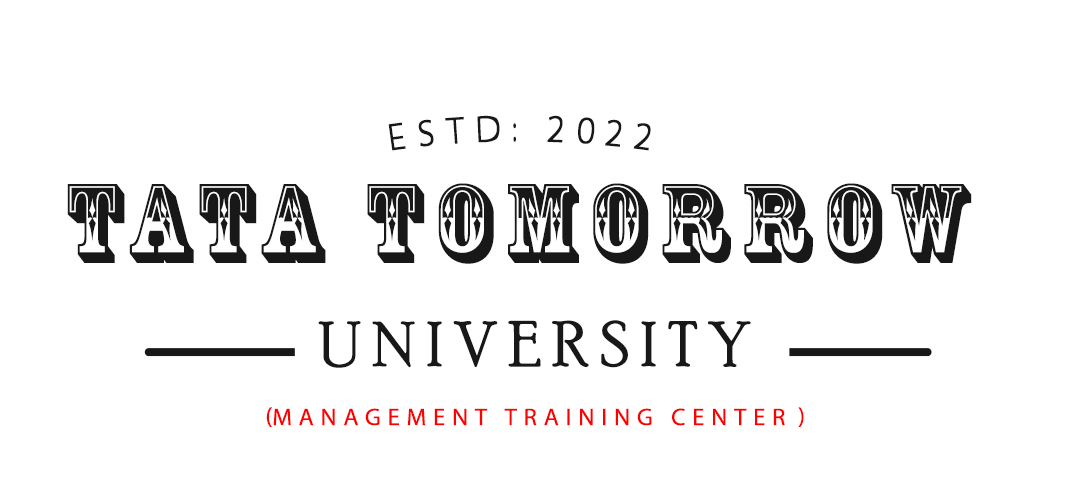
<style>
.page{position:relative;width:1067px;height:481px;background:#ffffff}
.page>*{position:absolute;margin:0}
.t1{font:36.8px "MyriadPro-Regular";letter-spacing:0.26em;color:#181818;text-transform:uppercase}
.t2{font:105.1px "RosewoodStd-Regular";letter-spacing:0.12em;color:#181818;text-transform:uppercase}
.t3{font:63.5px "PoorRichard-Regular";letter-spacing:0.18em;color:#181818;text-transform:uppercase}
.t4{font:23.9px "MyriadPro-Regular";letter-spacing:0.26em;color:#ff0000;text-transform:uppercase}
</style>
<div class="page">
<p class="t1" style="left:388px;top:115px;width:263px;height:36px">Estd: 2022</p>
<p class="t2" style="left:67px;top:183px;width:905px;height:81px">TATA TOMORROW</p>
<p class="t3" style="left:318px;top:320px;width:433px;height:48px">UNIVERSITY</p>
<p class="t4" style="left:266px;top:407px;width:538px;height:20px">(Management training center)</p>
</div>
